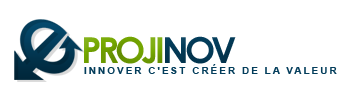
<style>
.page{position:relative;width:347px;height:98px;background:#ffffff}
.page>*{position:absolute;margin:0}
.t1{font:36px "CenturyGothic-Bold";letter-spacing:-0.1em;color:#76a901;text-transform:uppercase}
.t2{font:36px "CenturyGothic-Bold";letter-spacing:-0.1em;color:#033d5b;text-transform:uppercase}
.t3{font:10px "Arial-BoldMT";letter-spacing:0.2em;color:#033d5b;text-transform:uppercase}
</style>
<div class="page">
<p class="t1" style="left:84px;top:36px;width:152px;height:28px">PROJI<span class="t2">NOV</span></p>
<p class="t3" style="left:84px;top:64px;width:253px;height:10px">Innover c'est créer de la valeur</p>
</div>
